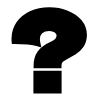
<style>
.page{position:relative;width:100px;height:100px;background:#ffffff}
.page>*{position:absolute;margin:0}
.t1{font:100px "DelaGothicOne-Regular";color:#000000}
</style>
<div class="page">
<p class="t1" style="left:11px;top:6px;width:77px;height:88px">?</p>
</div>
